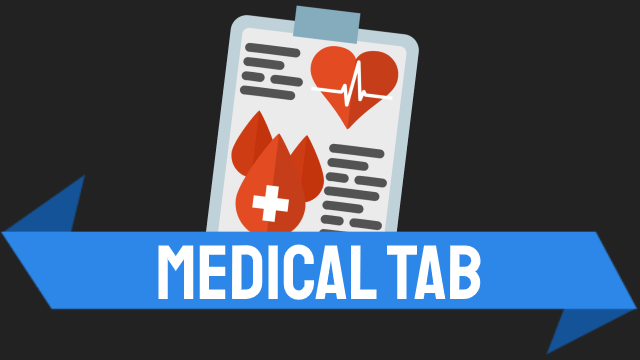
<style>
.page{position:relative;width:640px;height:360px;background:#222222}
.page>*{position:absolute;margin:0}
.t1{font:77px "Staatliches-Regular";color:#ffffff}
</style>
<div class="page">
<p class="t1" style="left:158px;top:244px;width:323px;height:56px">Medical Tab</p>
</div>
